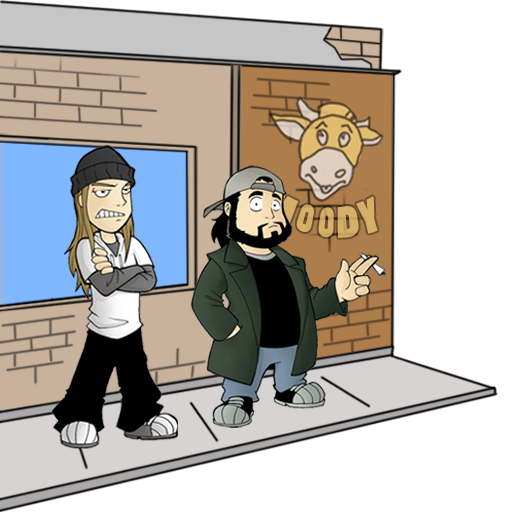
<style>
.page{position:relative;width:512px;height:512px;background:#ffffff}
.page>*{position:absolute;margin:0}
.t1{font:39.3px "PoplarStd";letter-spacing:0.06em;color:#d6af68;scale:0.88 1}
</style>
<div class="page">
<p class="t1" style="left:265px;top:189px;width:113px;height:49px;rotate:8deg">MOODY</p>
</div>
